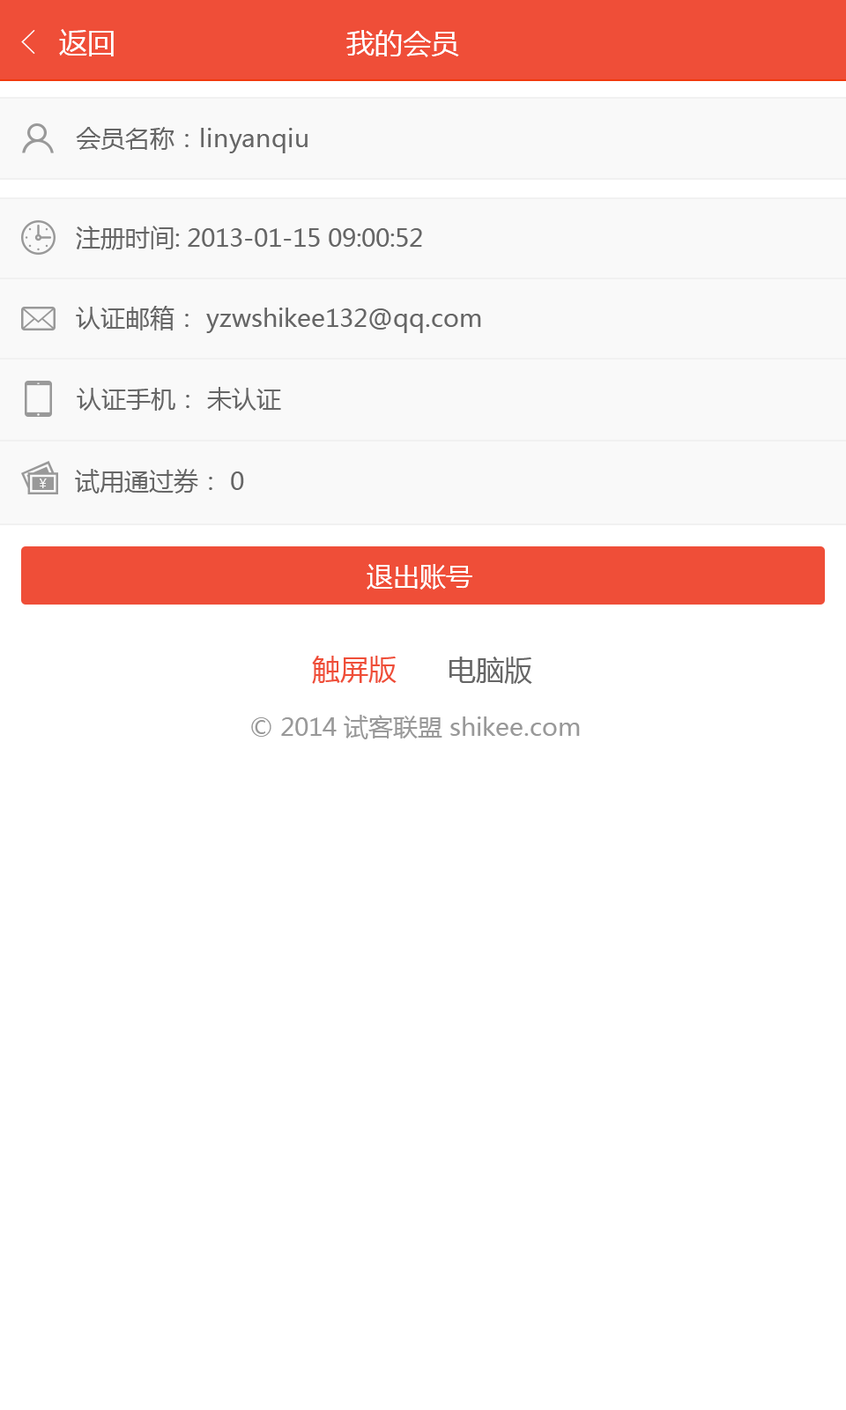
<style>
.page{position:relative;width:846px;height:1410px;background:#ffffff}
.page>*{position:absolute;margin:0}
.t1{font:35.2px "SimSun";color:#ffffff}
.t2{font:28.2px "MicrosoftYaHei";color:#ffffff}
.t3{font:24.7px "MicrosoftYaHei";color:#666666}
.t4{font:12.3px "MicrosoftYaHei";color:#f9f9f9}
.t5{font:26.4px "MicrosoftYaHei";color:#ffffff}
.t6{font:28.2px "MicrosoftYaHei";color:#ef4e38}
.t7{font:28.2px "MicrosoftYaHei";color:#666666}
.t8{font:24.7px "MicrosoftYaHei";color:#999999}
</style>
<div class="page">
<p class="t1" style="left:21px;top:30px;width:14px;height:24px">&lt;</p>
<p class="t2" style="left:59px;top:29px;width:55px;height:27px">返回</p>
<p class="t2" style="left:346px;top:30px;width:113px;height:27px">我的会员</p>
<p class="t3" style="left:76px;top:127px;width:232px;height:26px">会员名称：linyanqiu</p>
<p class="t3" style="left:76px;top:226px;width:346px;height:24px">注册时间: 2013-01-15 09:00:52</p>
<p class="t3" style="left:76px;top:306px;width:405px;height:27px">认证邮箱： yzwshikee132@qq.com</p>
<p class="t3" style="left:77px;top:387px;width:204px;height:24px">认证手机： 未认证</p>
<p class="t3" style="left:75px;top:469px;width:169px;height:24px">试用通过券： 0</p>
<p class="t4" style="left:40px;top:478px;width:7px;height:10px">￥</p>
<p class="t5" style="left:367px;top:564px;width:105px;height:25px">退出账号</p>
<p class="t6" style="left:312px;top:656px;width:84px;height:28px">触屏版</p>
<p class="t7" style="left:449px;top:656px;width:83px;height:28px">电脑版</p>
<p class="t8" style="left:251px;top:715px;width:329px;height:24px">© 2014 试客联盟 shikee.com</p>
</div>
